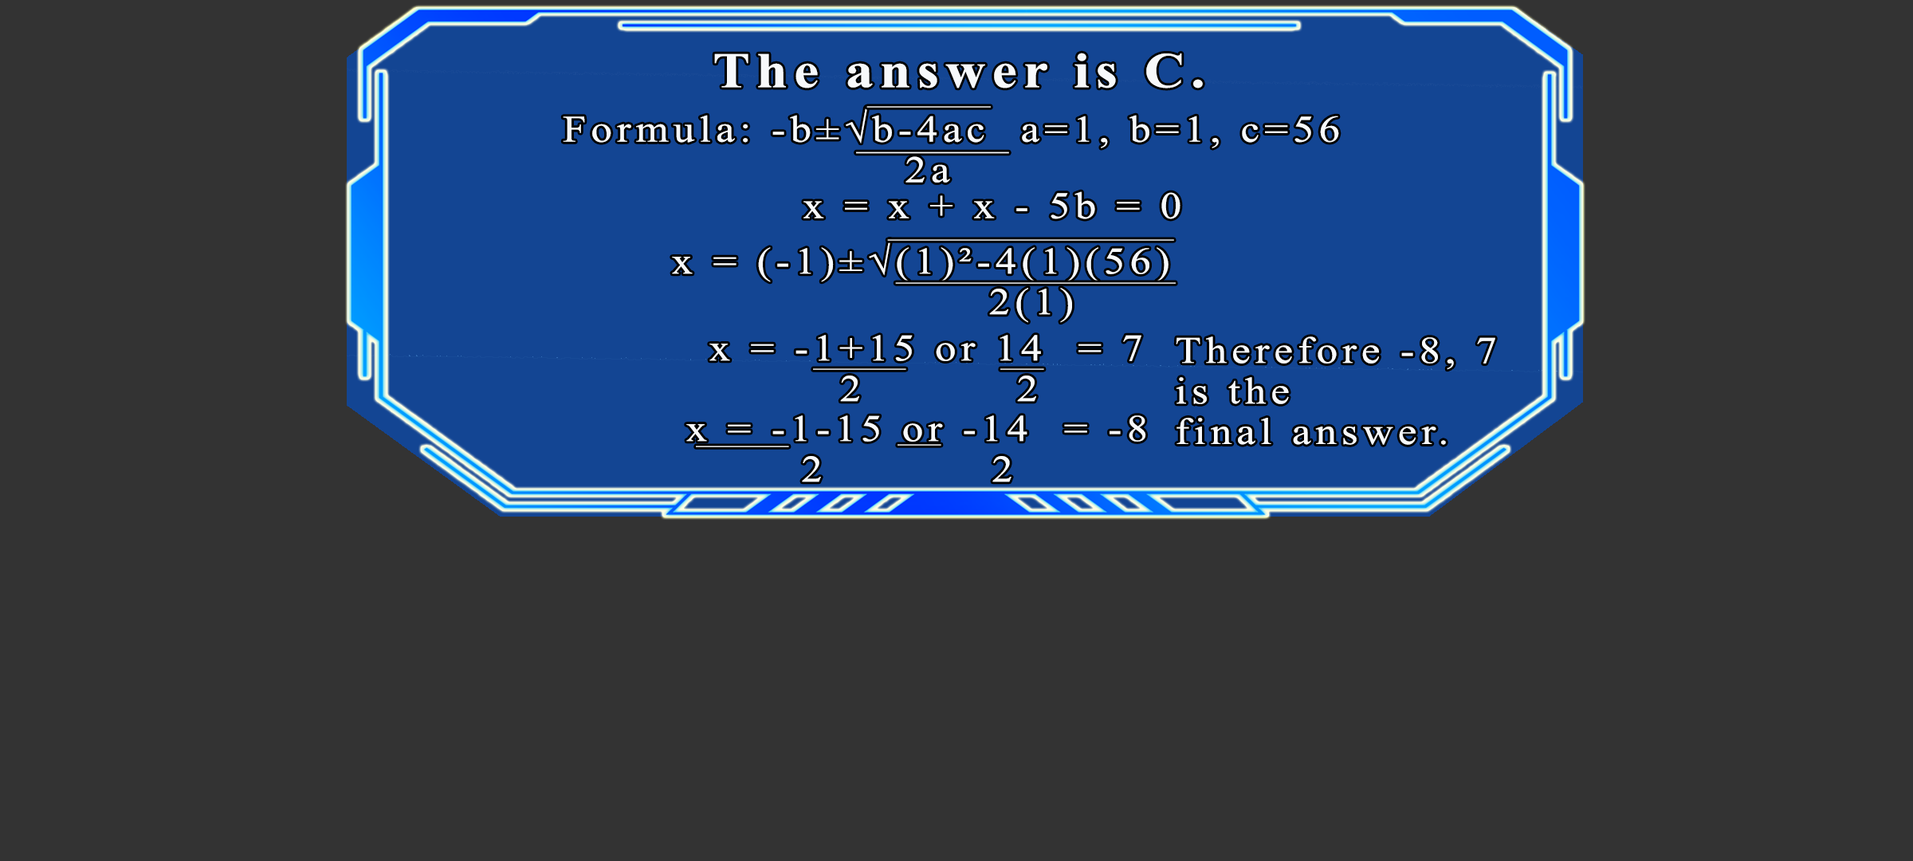
<style>
.page{position:relative;width:1913px;height:861px;background:#333333}
.page>*{position:absolute;margin:0}
.t1{font:49.8px "TimesNewRomanPS-BoldMT";letter-spacing:0.115em;color:#f7f9fb;scale:1.12 1}
.t2{font:37.6px/40.5px "TimesNewRomanPSMT";letter-spacing:0.115em;color:#f7f9fb;scale:1.12 1}
.t3{font:6.4px "GillSans-UltraBoldCondensed";letter-spacing:0.115em;scale:54.36 1}
.t4{font:9px "GillSans-UltraBoldCondensed";letter-spacing:0.115em;color:#f7f9fb;scale:48.05 1}
.t5{font:37.6px "TimesNewRomanPSMT";letter-spacing:0.115em;color:#f7f9fb;scale:1.12 1}
.t6{font:6.4px "GillSans-UltraBoldCondensed";letter-spacing:0.115em;scale:125.94 1}
.t7{font:6.4px "GillSans-UltraBoldCondensed";letter-spacing:0.115em;scale:123.25 1}
.t8{font:6.4px "GillSans-UltraBoldCondensed";letter-spacing:0.115em;scale:40.9 1}
.t9{font:6.4px "GillSans-UltraBoldCondensed";letter-spacing:0.115em;scale:19.11 1}
</style>
<div class="page">
<p class="t1" style="left:714px;top:53px;width:489px;height:35px">The answer is C.</p>
<p class="t2" style="left:563px;top:107px;width:776px;height:76px">Formula: -b±√b-4ac  a=1, b=1, c=56<br>                2a</p>
<p class="t3" style="left:866px;top:106px;width:125px;height:2px">_</p>
<p class="t4" style="left:856px;top:151px;width:153px;height:3px">_</p>
<p class="t5" style="left:803px;top:191px;width:377px;height:28px">x = x + x - 5b = 0</p>
<p class="t2" style="left:672px;top:239px;width:496px;height:84px">x = (-1)±√(1)²-4(1)(56)<br>                2(1)</p>
<p class="t6" style="left:887px;top:239px;width:287px;height:2px">_</p>
<p class="t7" style="left:895px;top:282px;width:281px;height:2px">_</p>
<p class="t2" style="left:709px;top:335px;width:432px;height:67px">x = -1+15 or 14  = 7 <br>       2          2</p>
<p class="t2" style="left:1176px;top:336px;width:319px;height:109px">Therefore -8, 7<br>is the<br>final answer.</p>
<p class="t8" style="left:813px;top:368px;width:93px;height:2px">_</p>
<p class="t9" style="left:1000px;top:368px;width:44px;height:2px">_</p>
<p class="t2" style="left:686px;top:415px;width:460px;height:67px">x = -1-15 or -14  = -8 <br>      2           2</p>
<p class="t8" style="left:696px;top:446px;width:93px;height:1px">_</p>
<p class="t9" style="left:897px;top:444px;width:44px;height:2px">_</p>
</div>
